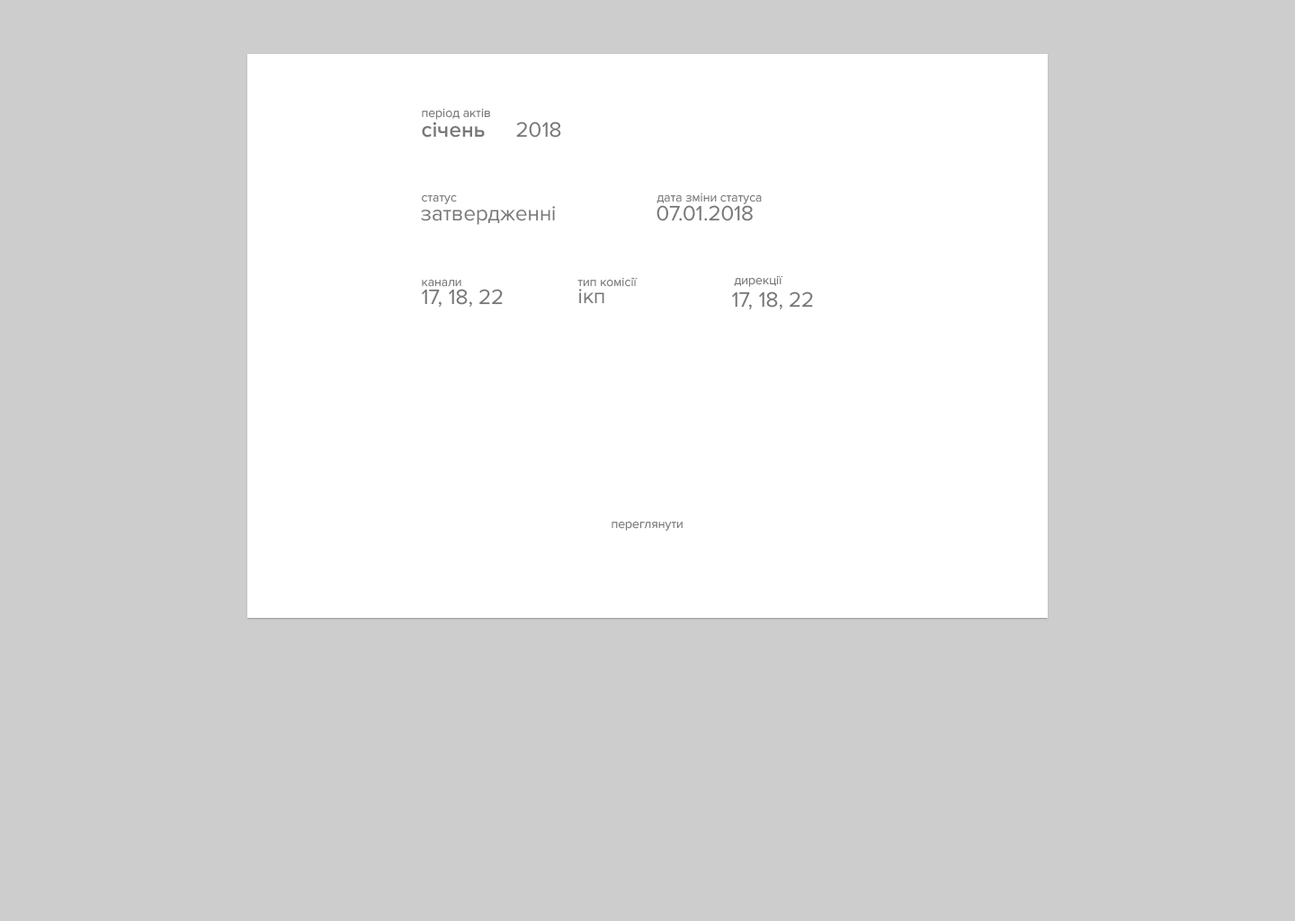
<style>
.page{position:relative;width:1295px;height:921px;background:#cdcdcd}
.page>*{position:absolute;margin:0}
.t1{font:12.6px "ProximaNova-Regular";color:#777777}
.t2{font:21.6px "ProximaNova-Semibold";color:#777777}
.t3{font:21.6px "ProximaNova-Regular";color:#777777}
</style>
<div class="page">
<p class="t1" style="left:422px;top:108px;width:68px;height:12px">період актів</p>
<p class="t2" style="left:422px;top:121px;width:63px;height:17px">січень</p>
<p class="t3" style="left:516px;top:121px;width:45px;height:17px">2018</p>
<p class="t1" style="left:422px;top:194px;width:35px;height:10px">статус</p>
<p class="t1" style="left:656px;top:192px;width:106px;height:12px">дата зміни статуса</p>
<p class="t3" style="left:421px;top:206px;width:134px;height:19px">затвердженні</p>
<p class="t3" style="left:656px;top:205px;width:97px;height:16px">07.01.2018</p>
<p class="t1" style="left:422px;top:279px;width:39px;height:8px">канали</p>
<p class="t1" style="left:577px;top:277px;width:61px;height:10px">тип комісії</p>
<p class="t1" style="left:734px;top:275px;width:49px;height:12px">дирекції</p>
<p class="t3" style="left:422px;top:289px;width:81px;height:18px">17, 18, 22</p>
<p class="t3" style="left:578px;top:289px;width:26px;height:15px">ікп</p>
<p class="t3" style="left:732px;top:291px;width:81px;height:18px">17, 18, 22</p>
<p class="t1" style="left:611px;top:521px;width:72px;height:10px">переглянути</p>
</div>
